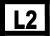
<style>
.page{position:relative;width:50px;height:36px;background:#000000}
.page>*{position:absolute;margin:0}
.t1{font:26px "Arial-Black";color:#000000;scale:0.69 1}
</style>
<div class="page">
<p class="t1" style="left:14px;top:10px;width:23px;height:19px">L2</p>
</div>
